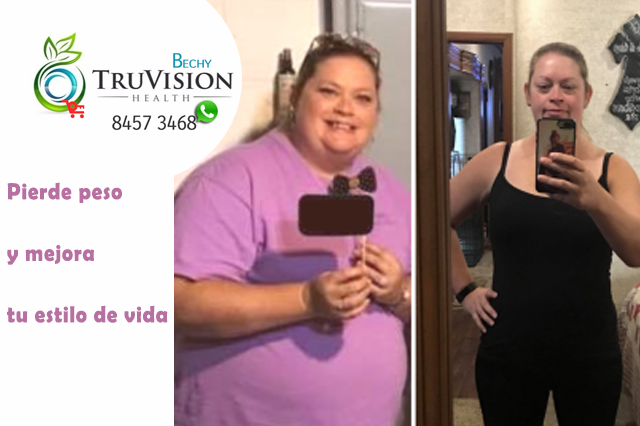
<style>
.page{position:relative;width:640px;height:426px;background:#fefefe}
.page>*{position:absolute;margin:0}
.t1{font:23.3px/61.5px "BerlinSansFBDemi-Bold";letter-spacing:0.04em;color:#b86fa1;scale:0.89 1}
</style>
<div class="page">
<p class="t1" style="left:7px;top:182px;width:161px;height:141px">Pierde peso <br>y mejora <br>tu estilo de vida</p>
</div>
